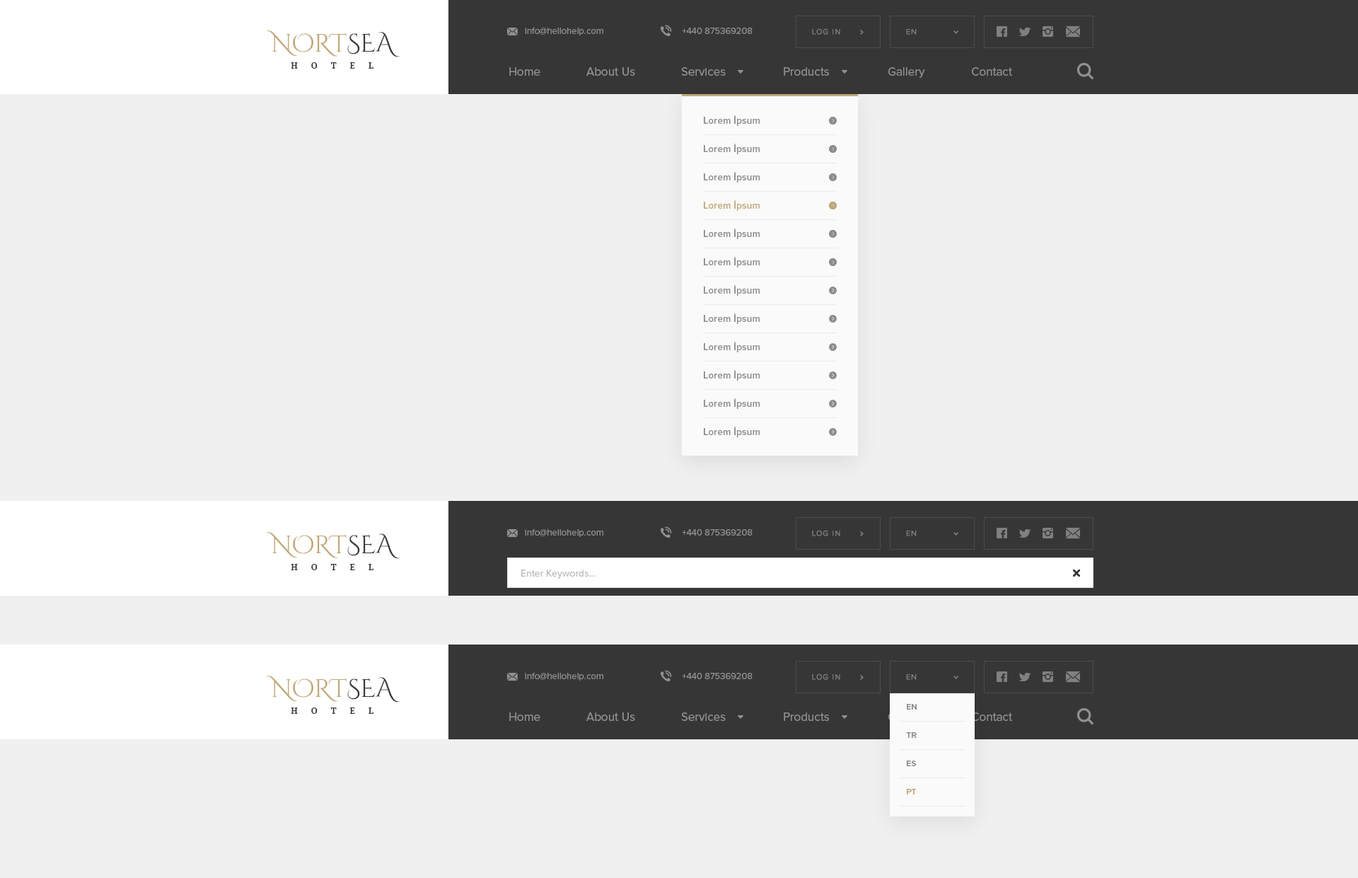
<style>
.page{position:relative;width:1358px;height:878px;background:#f0f0f0}
.page>*{position:absolute;margin:0}
.t1{font:9.2px "ProximaNova-Regular";color:#919191}
.t2{font:7.8px "ProximaNova-Regular";letter-spacing:0.1em;color:#7f7f7f}
.t3{font:25.3px "CinzelDecorative-Regular";color:#c0a878;text-transform:uppercase}
.t4{font:25.3px "CinzelDecorative-Regular";color:#3a3a3a;text-transform:uppercase}
.t5{font:8.8px "PTSerif-Bold";letter-spacing:1.5em;color:#3a3a3a;text-transform:uppercase}
.t6{font:12px "ProximaNova-Regular";color:#919191}
.t7{font:9.9px/14.1px "ProximaNova-Semibold";color:#8c8c8c}
.t8{font:9.9px/14.1px "ProximaNova-Semibold";color:#c0a878}
.t9{font:9.9px "ProximaNova-Regular";color:#b7b7b7}
.t10{font:8.5px/14.1px "ProximaNova-Semibold";color:#8c8c8c}
.t11{font:8.5px/14.1px "ProximaNova-Semibold";color:#c0a878}
</style>
<div class="page">
<p class="t1" style="left:525px;top:28px;width:78px;height:7px">info@hellohelp.com</p>
<p class="t1" style="left:682px;top:28px;width:71px;height:6px">+440 875369208</p>
<p class="t2" style="left:812px;top:28px;width:28px;height:7px">LOG IN</p>
<p class="t2" style="left:906px;top:29px;width:11px;height:6px">EN</p>
<p class="t3" style="left:266px;top:30px;width:134px;height:27px">nort<span class="t4">sea</span></p>
<p class="t5" style="left:291px;top:62px;width:83px;height:7px">hotel</p>
<p class="t6" style="left:509px;top:67px;width:31px;height:9px">Home</p>
<p class="t6" style="left:586px;top:67px;width:49px;height:9px">About Us</p>
<p class="t6" style="left:681px;top:67px;width:45px;height:9px">Services</p>
<p class="t6" style="left:784px;top:67px;width:45px;height:9px">Products</p>
<p class="t6" style="left:889px;top:67px;width:36px;height:11px">Gallery</p>
<p class="t6" style="left:972px;top:67px;width:40px;height:9px">Contact</p>
<p class="t7" style="left:704px;top:115px;width:56px;height:322px">Lorem İpsum<br><br>Lorem İpsum<br><br>Lorem İpsum<br><br><span class="t8">Lorem İpsum<br></span><br>Lorem İpsum<br><br>Lorem İpsum<br><br>Lorem İpsum<br><br>Lorem İpsum<br><br>Lorem İpsum<br><br>Lorem İpsum<br><br>Lorem İpsum<br><br>Lorem İpsum</p>
<p class="t3" style="left:266px;top:532px;width:134px;height:27px">nort<span class="t4">sea</span></p>
<p class="t1" style="left:525px;top:529px;width:78px;height:8px">info@hellohelp.com</p>
<p class="t1" style="left:682px;top:529px;width:71px;height:7px">+440 875369208</p>
<p class="t2" style="left:812px;top:530px;width:28px;height:6px">LOG IN</p>
<p class="t2" style="left:906px;top:531px;width:11px;height:5px">EN</p>
<p class="t5" style="left:291px;top:564px;width:83px;height:6px">hotel</p>
<p class="t9" style="left:521px;top:569px;width:75px;height:10px">Enter Keywords...</p>
<p class="t3" style="left:266px;top:676px;width:134px;height:26px">nort<span class="t4">sea</span></p>
<p class="t1" style="left:525px;top:673px;width:78px;height:8px">info@hellohelp.com</p>
<p class="t1" style="left:682px;top:673px;width:71px;height:6px">+440 875369208</p>
<p class="t2" style="left:812px;top:673px;width:28px;height:7px">LOG IN</p>
<p class="t2" style="left:906px;top:674px;width:11px;height:6px">EN</p>
<p class="t5" style="left:291px;top:707px;width:83px;height:7px">hotel</p>
<p class="t6" style="left:509px;top:712px;width:31px;height:9px">Home</p>
<p class="t6" style="left:586px;top:712px;width:49px;height:9px">About Us</p>
<p class="t6" style="left:681px;top:712px;width:45px;height:9px">Services</p>
<p class="t6" style="left:784px;top:712px;width:45px;height:9px">Products</p>
<p class="t10" style="left:906px;top:704px;width:11px;height:90px">EN<br><br>TR<br><br>ES<br><br><span class="t11">PT</span></p>
<p class="t6" style="left:972px;top:712px;width:40px;height:9px">Contact</p>
</div>
